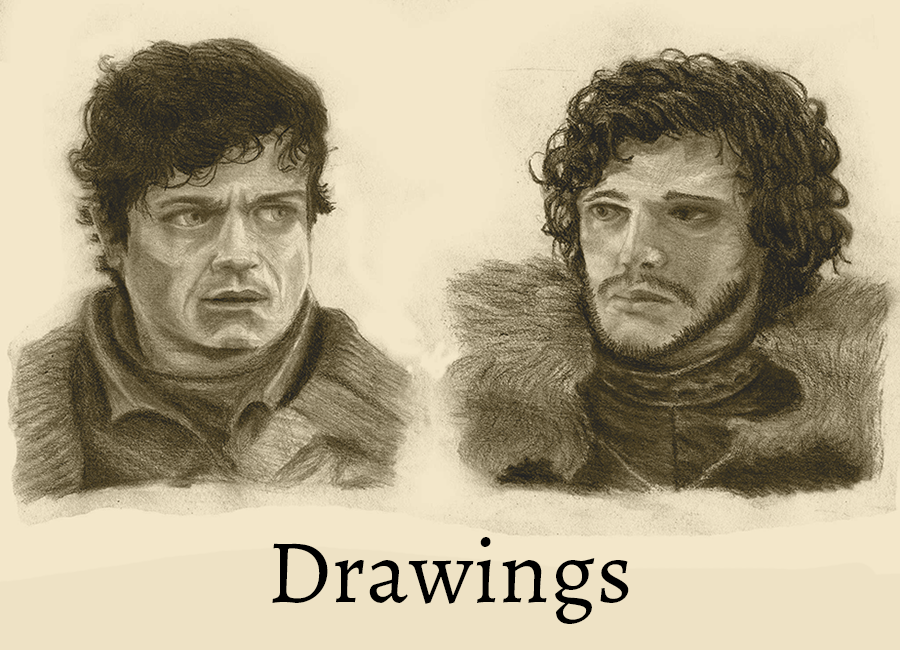
<style>
.page{position:relative;width:900px;height:650px}
.page>*{position:absolute;margin:0}
.t1{font:91.3px "Alegreya-Regular";color:#000000}
</style>
<div class="page">
<p class="t1" style="left:272px;top:537px;width:357px;height:87px">Drawings</p>
</div>
